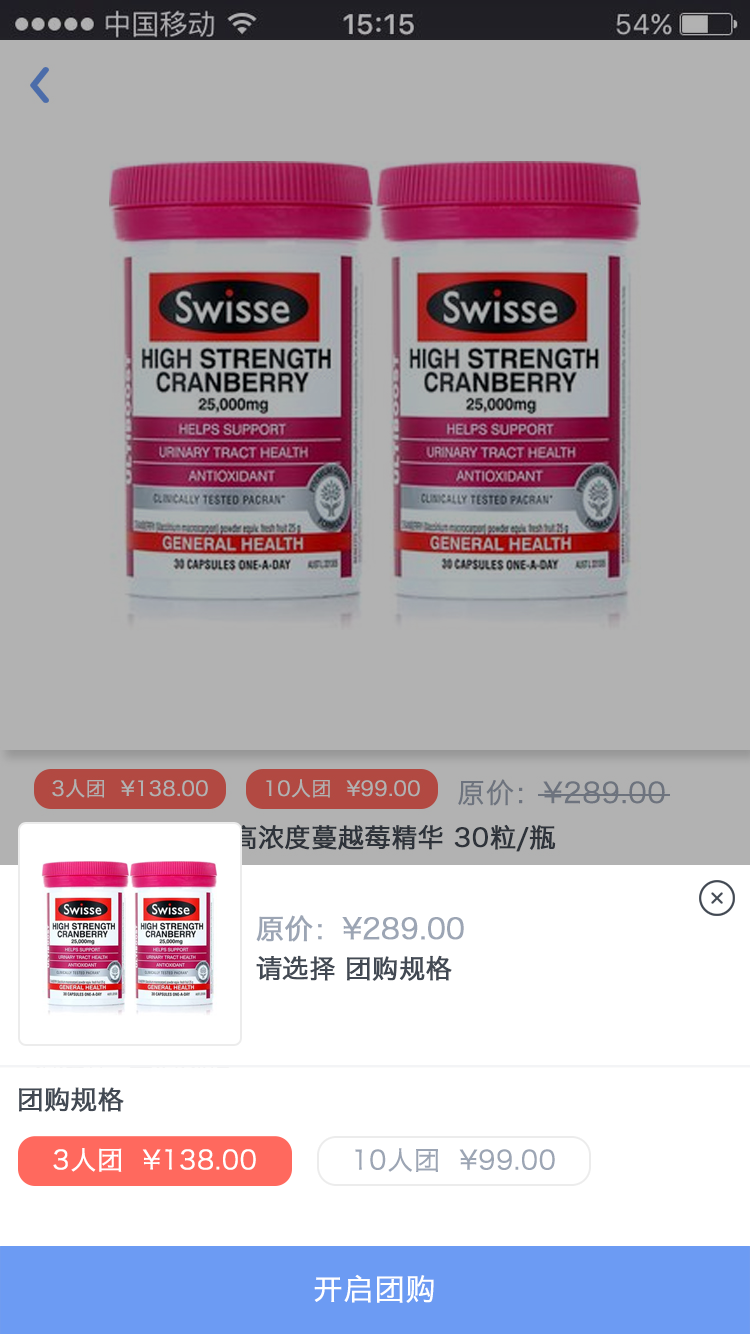
<style>
.page{position:relative;width:750px;height:1334px;background:#b2b2b2}
.page>*{position:absolute;margin:0}
.t1{font:28px "HiraginoSansGB-W3";color:#9ca5b4;font-weight:bold}
.t2{font:26px "HiraginoSansGB-W3";color:#424953;font-weight:bold}
.t3{font:25.9px "HiraginoSansGB-W3";color:#424953;font-weight:bold}
.t4{font:26px "HiraginoSansGB-W3";color:#ffffff;font-weight:bold}
.t5{font:26px "HiraginoSansGB-W3";color:#9ca5b4;font-weight:bold}
.t6{font:30px "HiraginoSansGB-W3";color:#ffffff;font-weight:bold}
</style>
<div class="page">
<p class="t1" style="left:256px;top:915px;width:208px;height:27px">原价：¥289.00</p>
<p class="t2" style="left:256px;top:955px;width:196px;height:26px">请选择 团购规格</p>
<p class="t3" style="left:19px;top:1087px;width:105px;height:25px">团购规格</p>
<p class="t4" style="left:53px;top:1148px;width:203px;height:24px">3人团  ¥138.00</p>
<p class="t5" style="left:355px;top:1148px;width:200px;height:24px">10人团  ¥99.00</p>
<p class="t6" style="left:314px;top:1274px;width:120px;height:29px">开启团购</p>
</div>
